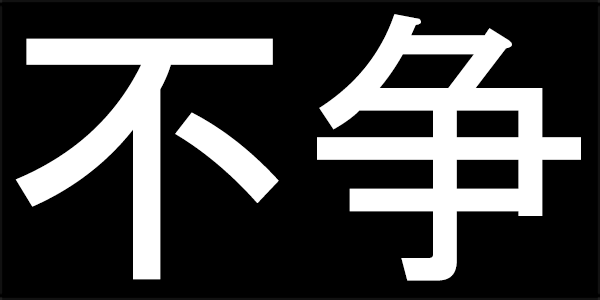
<style>
.page{position:relative;width:600px;height:300px;background:#000000}
.page>*{position:absolute;margin:0}
.t1{font:300px "MS-Gothic";color:#ffffff}
</style>
<div class="page">
<p class="t1" style="left:15px;top:14px;width:566px;height:267px">不争</p>
</div>
